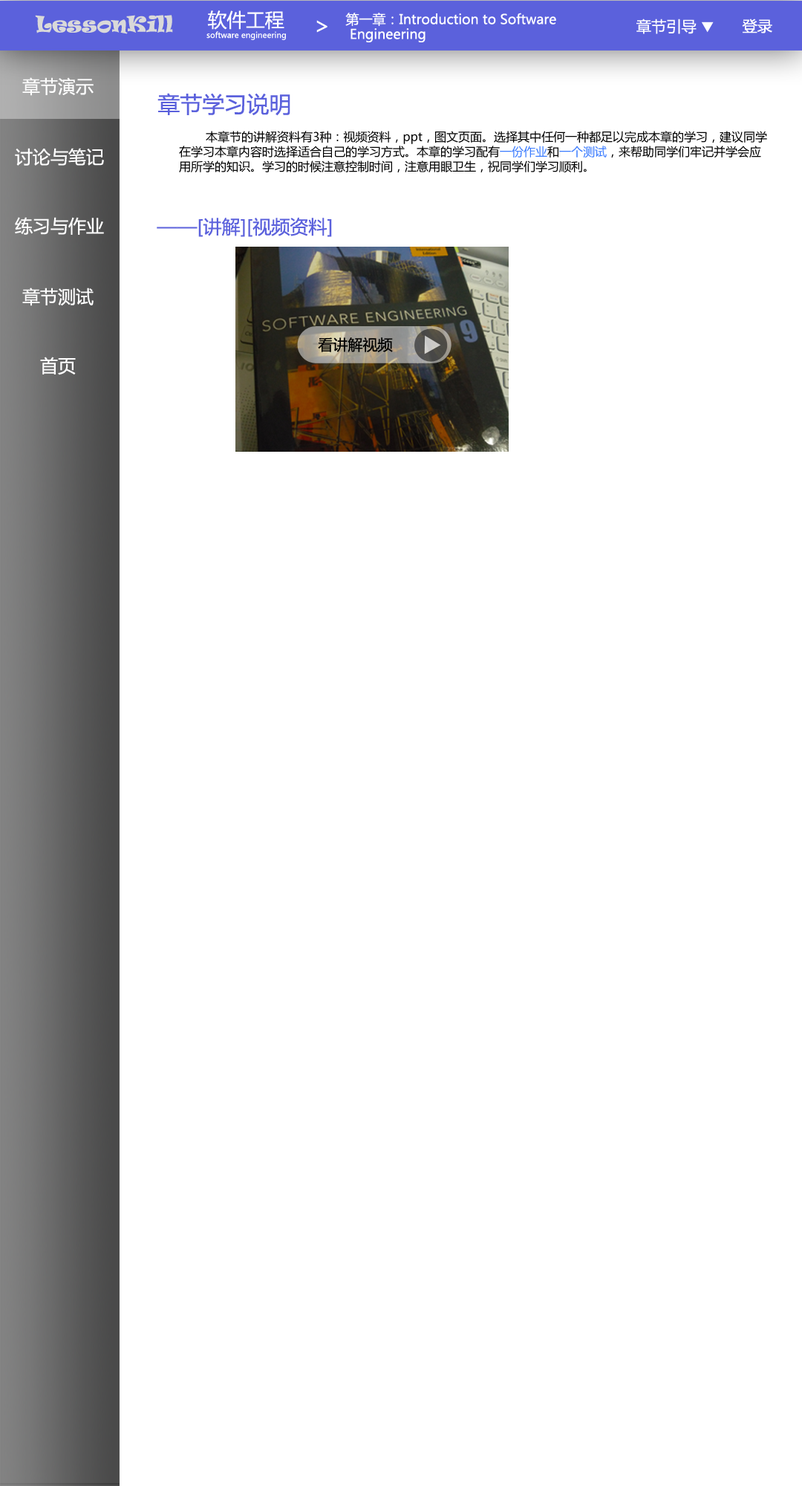
<style>
.page{position:relative;width:802px;height:1486px;background:#ffffff}
.page>*{position:absolute;margin:0}
.t1{font:20.3px "Ravie";color:#d9d9d9}
.t2{font:13.4px/14.9px "MicrosoftYaHei";color:#ffffff}
.t3{font:22.3px "MicrosoftYaHei";color:#ffffff}
.t4{font:15px "MicrosoftYaHei";color:#ffffff}
.t5{font:14.9px "MicrosoftYaHei";color:#ffffff}
.t6{font:17.8px "MicrosoftYaHei";color:#ffffff}
.t7{font:22.3px "MicrosoftYaHei";color:#5b61dc}
.t8{font:11.9px/14.9px "MicrosoftYaHei";color:#000000}
.t9{font:11.9px/14.9px "MicrosoftYaHei";color:#3a7bff}
.t10{font:18.6px "MicrosoftYaHei";color:#5b61dc}
.t11{font:14.9px "MicrosoftYaHei";color:#000000}
</style>
<div class="page">
<p class="t1" style="left:35px;top:15px;width:138px;height:19px">LessonKill</p>
<p class="t2" style="left:345px;top:13px;width:212px;height:29px">第一章：Introduction to Software<br> Engineering</p>
<p class="t3" style="left:317px;top:20px;width:11px;height:13px">&gt;</p>
<p class="t4" style="left:637px;top:19px;width:60px;height:15px">章节引导</p>
<p class="t5" style="left:742px;top:19px;width:31px;height:14px">登录</p>
<p class="t6" style="left:22px;top:77px;width:72px;height:19px">章节演示</p>
<p class="t7" style="left:158px;top:93px;width:133px;height:23px">章节学习说明</p>
<p class="t8" style="left:179px;top:131px;width:589px;height:42px">本章节的讲解资料有3种：视频资料，ppt，图文页面。选择其中任何一种都足以完成本章的学习，建议同学<br>在学习本章内容时选择适合自己的学习方式。本章的学习配有<span class="t9">一份作业</span>和<span class="t9">一个测试</span>，来帮助同学们牢记并学会应<br>用所学的知识。学习的时候注意控制时间，注意用眼卫生，祝同学们学习顺利。</p>
<p class="t6" style="left:15px;top:148px;width:89px;height:18px">讨论与笔记</p>
<p class="t6" style="left:15px;top:217px;width:89px;height:18px">练习与作业</p>
<p class="t10" style="left:157px;top:217px;width:175px;height:20px">——[讲解][视频资料]</p>
<p class="t6" style="left:22px;top:288px;width:72px;height:18px">章节测试</p>
<p class="t11" style="left:318px;top:337px;width:75px;height:15px">看讲解视频</p>
<p class="t6" style="left:40px;top:357px;width:36px;height:18px">首页</p>
</div>
